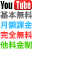
<style>
.page{position:relative;width:80px;height:80px;background:#ffffff}
.page>*{position:absolute;margin:0}
.t1{font:8px "HiraginoKaku-W7-90msp-RKSJ-H";color:#666666}
.t2{font:8px "HiraginoKaku-W7-90msp-RKSJ-H";color:#33bbff}
.t3{font:8px "HiraginoKaku-W7-90msp-RKSJ-H";color:#ff3333}
.t4{font:8px "HiraginoKaku-W7-90msp-RKSJ-H";color:#44cc00}
</style>
<div class="page">
<p class="t1" style="left:0px;top:11px;width:32px;height:8px">基本無料</p>
<p class="t2" style="left:0px;top:21px;width:32px;height:8px">月額課金</p>
<p class="t3" style="left:0px;top:31px;width:32px;height:8px">完全無料</p>
<p class="t4" style="left:0px;top:41px;width:32px;height:8px">他料金制</p>
</div>
